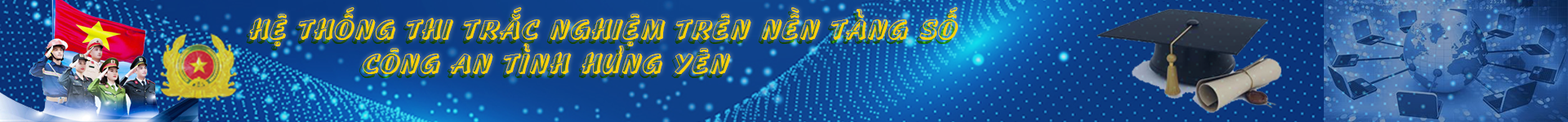
<style>
.page{position:relative;width:1568px;height:122px}
.page>*{position:absolute;margin:0}
.t1{font:29.4px "VNI-Standout-Regular";color:#fdd103}
</style>
<div class="page">
<p class="t1" style="left:249px;top:7px;width:709px;height:40px">hEÄ THOÁNG THI TRAÉC NGHIEÄM TREÂN NEÀN TAÛNG SOÁ</p>
<p class="t1" style="left:363px;top:43px;width:368px;height:31px">coâng an tænh höng yeân</p>
</div>
